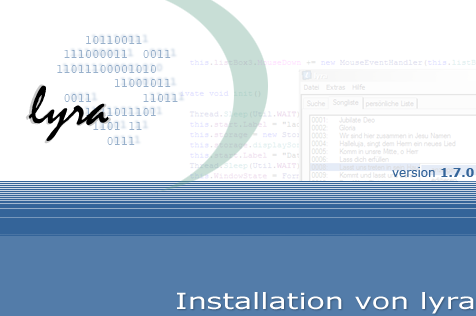
<style>
.page{position:relative;width:476px;height:316px;background:#ffffff}
.page>*{position:absolute;margin:0}
.t1{font:12px "CourierNewPSMT";color:#97b0cb}
.t2{font:60px "Mistral"}
.t3{font:56.5px "Mistral";color:#000000}
.t4{font:12px "Verdana";color:#346499}
.t5{font:12px "Verdana-Bold";color:#346499}
.t6{font:22.5px "Verdana";color:#ffffff;scale:1.33 1}
</style>
<div class="page">
<p class="t1" style="left:57px;top:36px;width:121px;height:109px">10110011   <br>  111000011  0011<br> 11011100001010<br>         11001011<br>  0011       11011<br>    11011011101<br>      1101 11<br>        0111</p>
<p class="t2" style="left:25px;top:84px;width:86px;height:60px">lyra</p>
<p class="t3" style="left:28px;top:85px;width:81px;height:56px">lyra</p>
<p class="t4" style="left:392px;top:167px;width:82px;height:10px">version <span class="t5">1.7.0</span></p>
<p class="t6" style="left:177px;top:292px;width:297px;height:22px">Installation von lyra</p>
</div>
